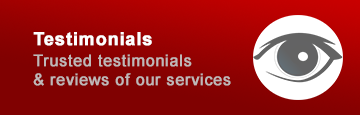
<style>
.page{position:relative;width:360px;height:115px}
.page>*{position:absolute;margin:0}
.t1{font:18px "Arial-BoldMT";letter-spacing:0.025em;color:#ffffff;font-weight:bold}
.t2{font:16px "ArialMT";letter-spacing:0.025em;color:#c0b8b8;font-weight:bold}
</style>
<div class="page">
<p class="t1" style="left:33px;top:32px;width:119px;height:14px">Testimonials</p>
<p class="t2" style="left:33px;top:54px;width:198px;height:32px">Trusted testimonials<br>&amp; reviews of our services</p>
</div>
